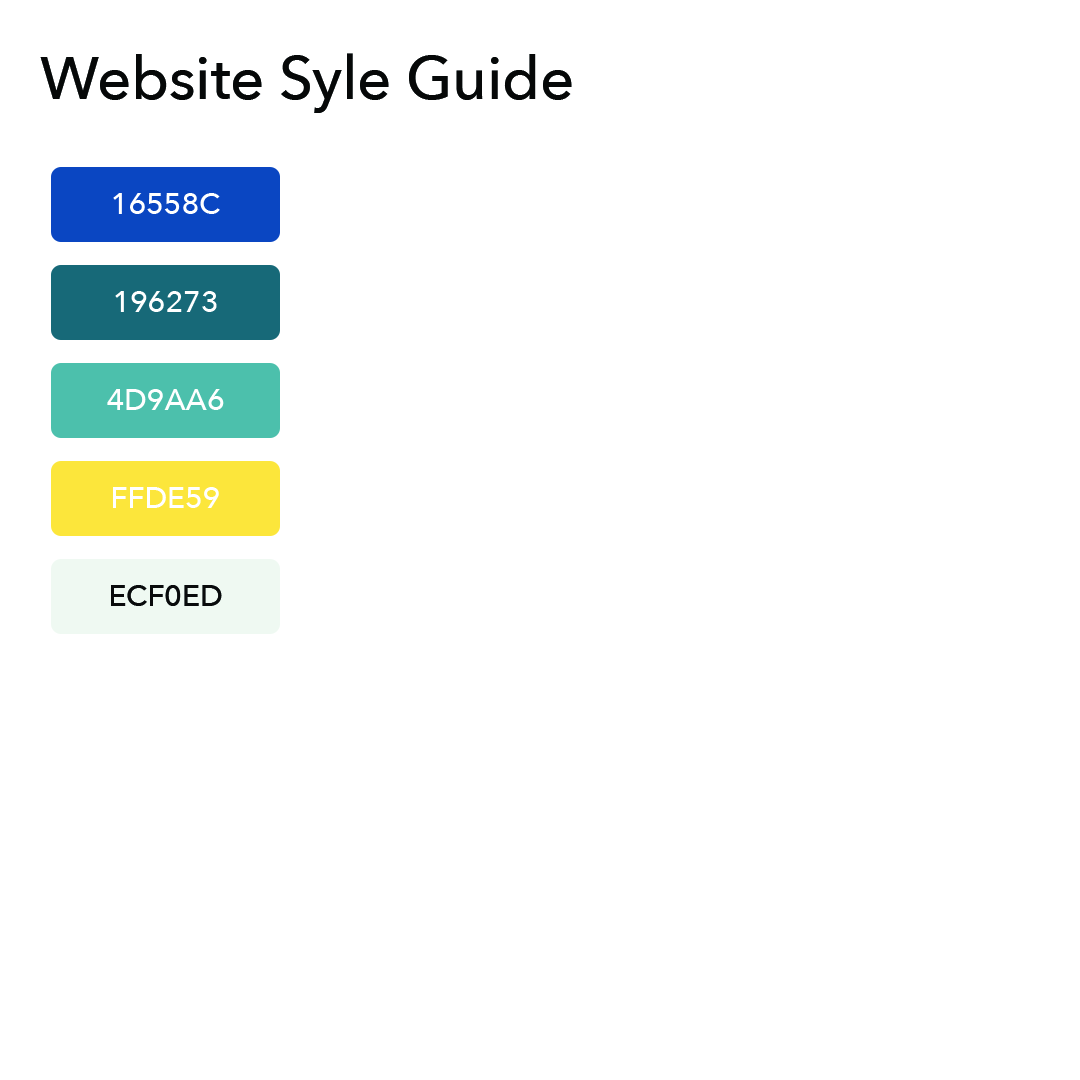
<style>
.page{position:relative;width:1080px;height:1080px;background:#ffffff}
.page>*{position:absolute;margin:0}
.t1{font:60px "AvenirNext-Medium";letter-spacing:-0.005em;color:#060808}
.t2{font:30px "AvenirNext-Medium";letter-spacing:-0.005em;color:#ffffff}
.t3{font:30px "AvenirNext-Medium";letter-spacing:-0.005em;color:#090b0c}
</style>
<div class="page">
<p class="t1" style="left:40px;top:53px;width:532px;height:60px">Website Syle Guide</p>
<p class="t2" style="left:113px;top:193px;width:107px;height:21px">16558C</p>
<p class="t2" style="left:115px;top:291px;width:102px;height:21px">196273</p>
<p class="t2" style="left:107px;top:389px;width:117px;height:21px">4D9AA6</p>
<p class="t2" style="left:113px;top:487px;width:106px;height:21px">FFDE59</p>
<p class="t3" style="left:111px;top:585px;width:111px;height:21px">ECF0ED</p>
</div>
